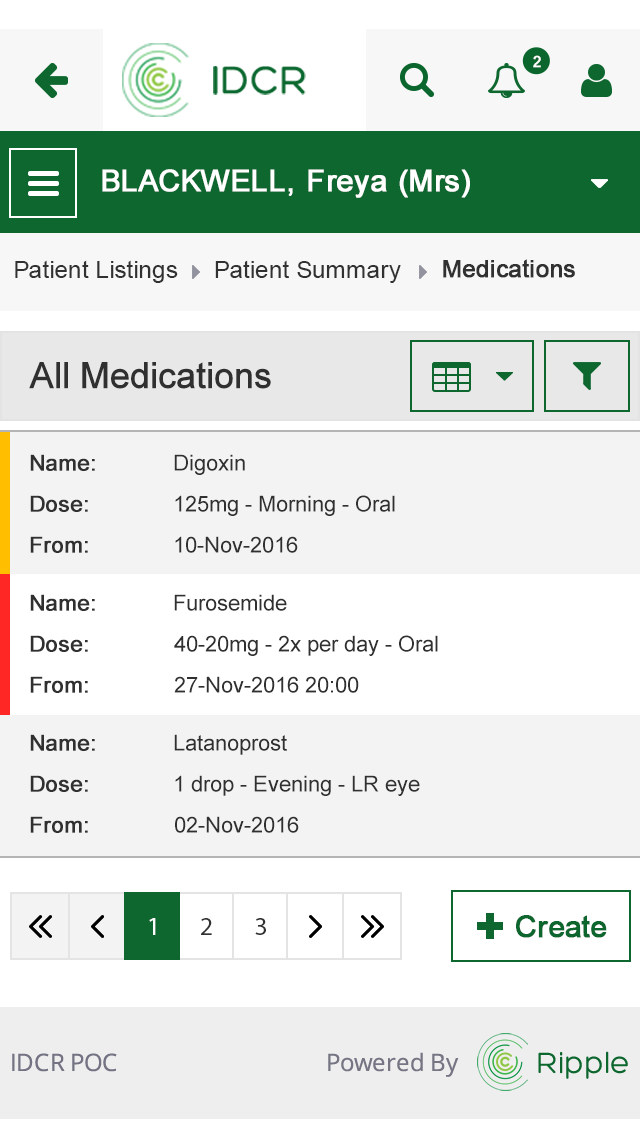
<style>
.page{position:relative;width:640px;height:1144px;background:#ffffff}
.page>*{position:absolute;margin:0}
.t1{font:24px "ArialMT";color:#313131}
.t2{font:24px "ArialMT";color:#313131;font-weight:bold}
.t3{font:36px "ArialMT";color:#303030;font-weight:bold}
.t4{font:22px "ArialMT";color:#303030;font-weight:bold}
.t5{font:22px "ArialMT";color:#303030}
</style>
<div class="page">
<p class="t1" style="left:15px;top:260px;width:163px;height:23px">Patient Listings</p>
<p class="t1" style="left:215px;top:260px;width:186px;height:23px">Patient Summary</p>
<p class="t2" style="left:443px;top:259px;width:132px;height:19px">Medications</p>
<p class="t3" style="left:29px;top:362px;width:242px;height:27px">All Medications</p>
<p class="t4" style="left:30px;top:454px;width:65px;height:17px">Name:</p>
<p class="t5" style="left:174px;top:454px;width:71px;height:21px">Digoxin</p>
<p class="t4" style="left:30px;top:495px;width:58px;height:17px">Dose:</p>
<p class="t5" style="left:175px;top:495px;width:220px;height:21px">125mg - Morning - Oral</p>
<p class="t4" style="left:30px;top:536px;width:58px;height:17px">From:</p>
<p class="t5" style="left:175px;top:536px;width:123px;height:17px">10-Nov-2016</p>
<p class="t4" style="left:30px;top:594px;width:65px;height:17px">Name:</p>
<p class="t5" style="left:174px;top:594px;width:113px;height:17px">Furosemide</p>
<p class="t4" style="left:30px;top:635px;width:58px;height:17px">Dose:</p>
<p class="t5" style="left:174px;top:635px;width:264px;height:21px">40-20mg - 2x per day - Oral</p>
<p class="t4" style="left:30px;top:676px;width:58px;height:17px">From:</p>
<p class="t5" style="left:174px;top:676px;width:185px;height:17px">27-Nov-2016 20:00</p>
<p class="t4" style="left:30px;top:734px;width:65px;height:17px">Name:</p>
<p class="t5" style="left:174px;top:734px;width:113px;height:21px">Latanoprost</p>
<p class="t4" style="left:30px;top:775px;width:58px;height:17px">Dose:</p>
<p class="t5" style="left:175px;top:775px;width:245px;height:21px">1 drop - Evening - LR eye</p>
<p class="t4" style="left:30px;top:816px;width:58px;height:17px">From:</p>
<p class="t5" style="left:175px;top:816px;width:124px;height:17px">02-Nov-2016</p>
</div>
